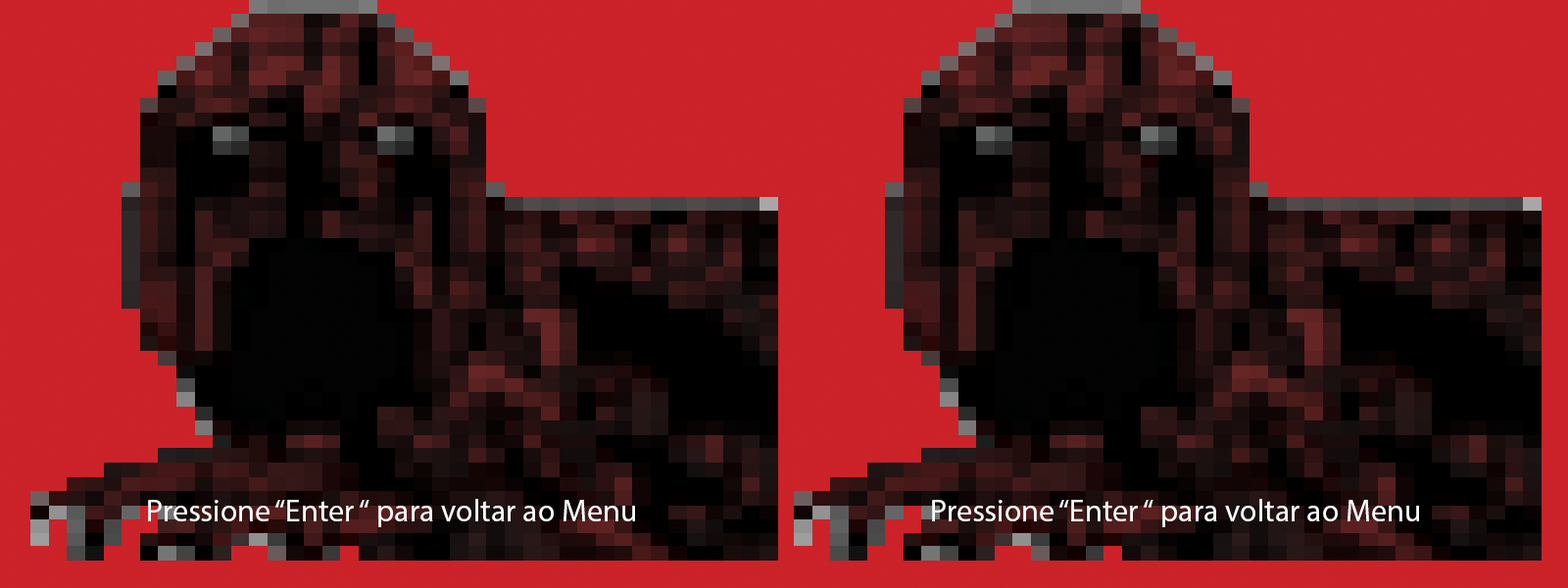
<style>
.page{position:relative;width:1568px;height:588px}
.page>*{position:absolute;margin:0}
.t1{font:31.4px "MyriadPro-Regular";color:#ffffff}
</style>
<div class="page">
<p class="t1" style="left:148px;top:499px;width:487px;height:28px">Pressione “Enter “ para voltar ao Menu</p>
<p class="t1" style="left:932px;top:499px;width:487px;height:28px">Pressione “Enter “ para voltar ao Menu</p>
</div>
